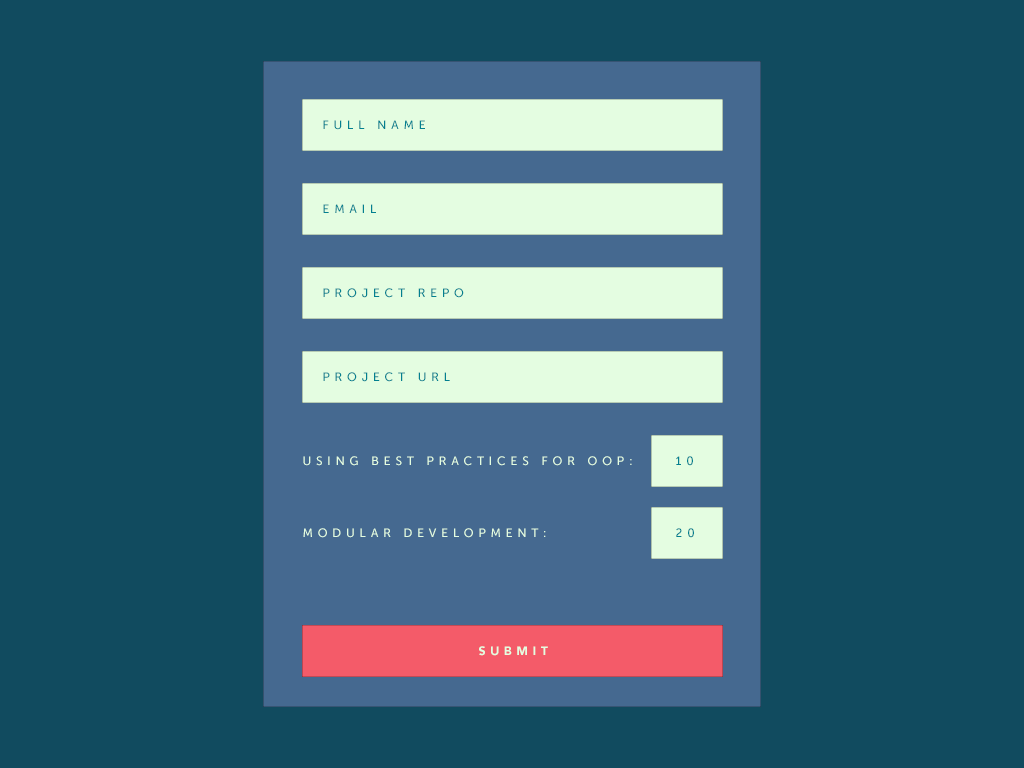
<style>
.page{position:relative;width:1024px;height:768px;background:#114b5f}
.page>*{position:absolute;margin:0}
.t1{font:12px "MuseoSans-500";letter-spacing:0.4em;color:#028090;text-transform:uppercase}
.t2{font:12px "MuseoSans-500";letter-spacing:0.4em;color:#e4fde1;text-transform:uppercase}
.t3{font:12px "Avenir-Black";letter-spacing:0.4em;color:#e4fde1;text-transform:uppercase}
</style>
<div class="page">
<p class="t1" style="left:323px;top:120px;width:102px;height:10px">full name</p>
<p class="t1" style="left:323px;top:204px;width:53px;height:9px">email</p>
<p class="t1" style="left:323px;top:288px;width:141px;height:10px">Project repo</p>
<p class="t1" style="left:323px;top:372px;width:127px;height:10px">PROJECT URL</p>
<p class="t2" style="left:303px;top:456px;width:329px;height:10px">using best practices for OOP:</p>
<p class="t1" style="left:676px;top:456px;width:17px;height:10px">10</p>
<p class="t2" style="left:303px;top:528px;width:243px;height:10px">Modular development:</p>
<p class="t1" style="left:676px;top:528px;width:18px;height:10px">20</p>
<p class="t3" style="left:479px;top:646px;width:69px;height:10px">SUBMIT</p>
</div>
